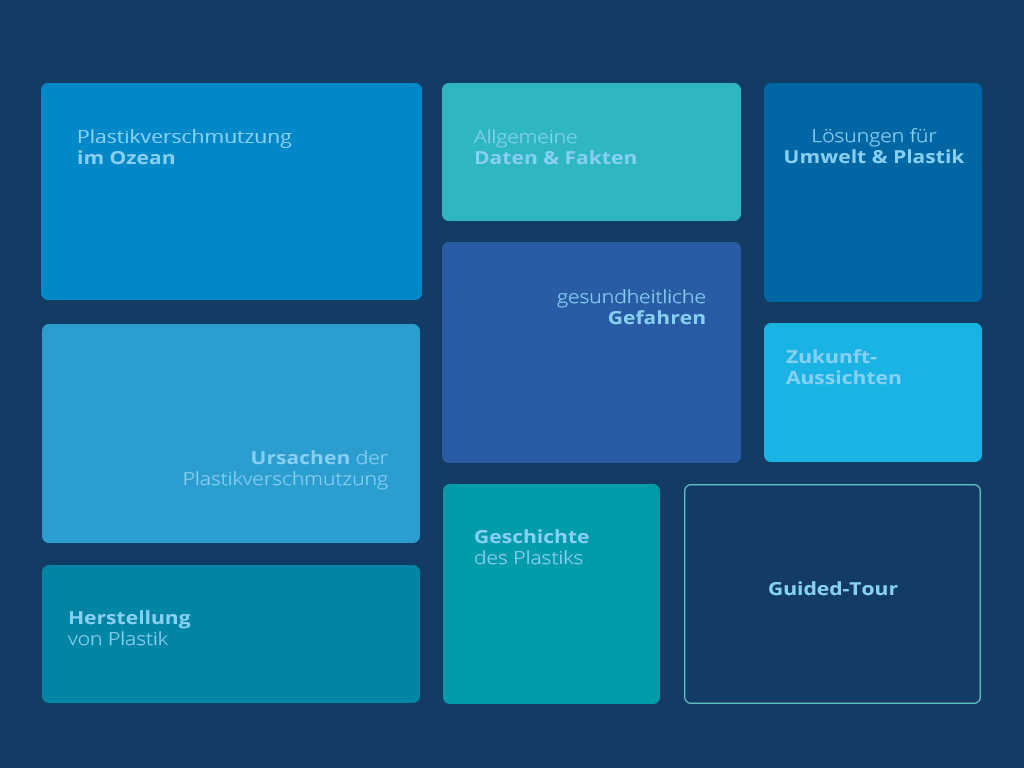
<style>
.page{position:relative;width:1024px;height:768px;background:#133c64}
.page>*{position:absolute;margin:0}
.t1{font:18px "OpenSans";color:#86d0f4;scale:1.17 1}
.t2{font:18px "OpenSans-Bold";color:#86d0f4;scale:1.17 1}
.t3{font:18px "OpenSans-Light";color:#86d0f4;scale:1.17 1}
</style>
<div class="page">
<p class="t1" style="left:78px;top:129px;width:214px;height:36px">Plastikverschmutzung <br><span class="t2">im Ozean</span></p>
<p class="t2" style="left:474px;top:129px;width:162px;height:36px"><span class="t3">Allgemeine<br></span>Daten &amp; Fakten</p>
<p class="t2" style="left:785px;top:128px;width:180px;height:36px;text-align:center"><span class="t3">Lösungen für<br></span>Umwelt &amp; Plastik</p>
<p class="t3" style="left:557px;top:289px;width:148px;height:36px;text-align:right">gesundheitliche <br><span class="t2">Gefahren</span></p>
<p class="t2" style="left:786px;top:349px;width:115px;height:36px">Zukunft-<br>Aussichten</p>
<p class="t3" style="left:184px;top:450px;width:204px;height:40px;text-align:right"><span class="t2">Ursachen</span> der Plastikverschmutzung</p>
<p class="t3" style="left:475px;top:529px;width:114px;height:36px"><span class="t2">Geschichte<br></span>des Plastiks</p>
<p class="t2" style="left:769px;top:581px;width:129px;height:15px">Guided-Tour</p>
<p class="t2" style="left:68px;top:610px;width:123px;height:36px">Herstellung <br><span class="t3">von Plastik</span></p>
</div>
